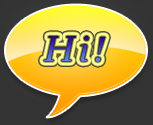
<style>
.page{position:relative;width:153px;height:125px;background:#333333}
.page>*{position:absolute;margin:0}
.t1{font:36px "Constantia-Italic";letter-spacing:0.1em;scale:1.1 1}
</style>
<div class="page">
<p class="t1" style="left:44px;top:36px;width:61px;height:26px">Hi!</p>
</div>
